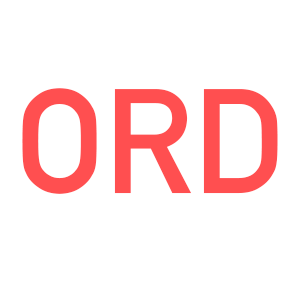
<style>
.page{position:relative;width:300px;height:300px;background:#ffffff}
.page>*{position:absolute;margin:0}
.t1{font:146px "DINAlternate-Bold";color:#ff4f50}
</style>
<div class="page">
<p class="t1" style="left:22px;top:88px;width:256px;height:106px">ORD</p>
</div>
